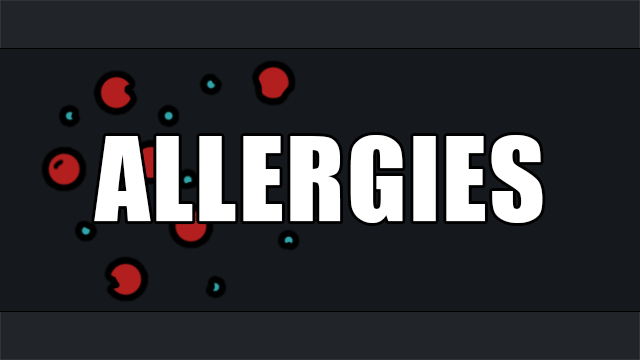
<style>
.page{position:relative;width:640px;height:360px;background:#15191d}
.page>*{position:absolute;margin:0}
.t1{font:106.7px "Impact";letter-spacing:0.02em;color:#ffffff}
</style>
<div class="page">
<p class="t1" style="left:94px;top:135px;width:449px;height:88px">ALLERGIES</p>
</div>
